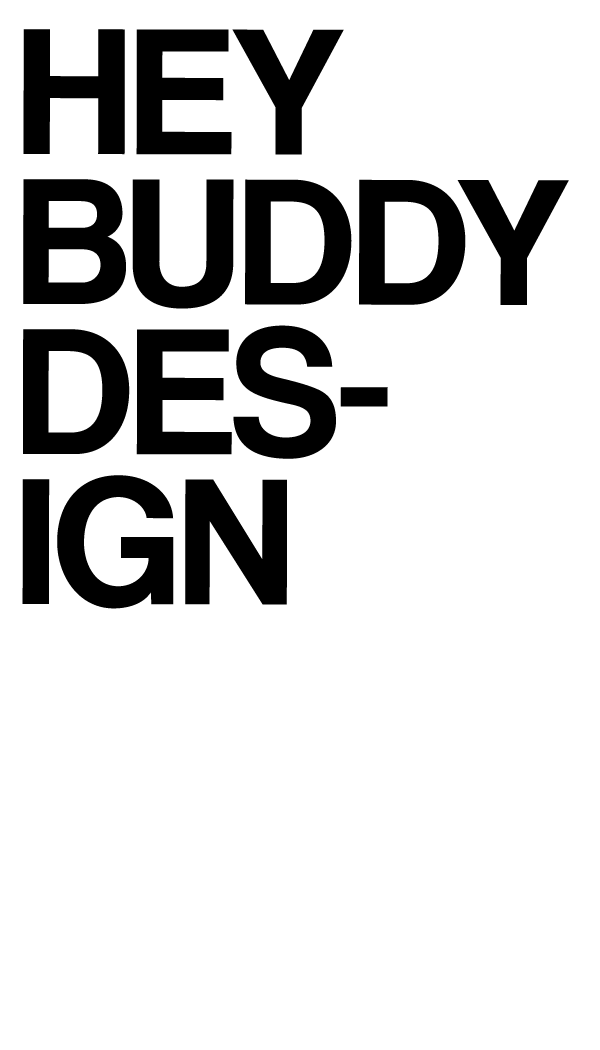
<style>
.page{position:relative;width:600px;height:1050px;background:#ffffff}
.page>*{position:absolute;margin:0}
.t1{font:187.5px/150px "CoolveticaRg-Regular";letter-spacing:0.01em;color:#000000}
</style>
<div class="page">
<p class="t1" style="left:22px;top:29px;width:547px;height:580px">HEY<br>BUDDY<br>DES-IGN</p>
</div>
